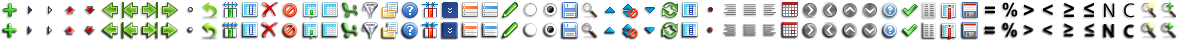
<style>
.page{position:relative;width:1180px;height:40px;background:#ffffff}
.page>*{position:absolute;margin:0}
.t1{font:20px "Arial-BoldMT";color:#000000}
.t2{font:18px "Arial-BoldMT";color:#000000}
.t3{font:20px "MyriadPro-Regular";color:#000000}
.t4{font:18px "MyriadPro-Bold";color:#000000}
</style>
<div class="page">
<p class="t1" style="left:985px;top:6px;width:10px;height:8px">=</p>
<p class="t2" style="left:1002px;top:2px;width:16px;height:15px">%</p>
<p class="t1" style="left:1024px;top:4px;width:10px;height:12px">&gt;</p>
<p class="t1" style="left:1043px;top:4px;width:10px;height:12px">&lt;</p>
<p class="t1" style="left:1064px;top:2px;width:10px;height:15px">≥</p>
<p class="t1" style="left:1084px;top:2px;width:10px;height:15px">≤</p>
<p class="t3" style="left:1104px;top:3px;width:11px;height:14px">N</p>
<p class="t3" style="left:1124px;top:3px;width:11px;height:15px">C</p>
<p class="t1" style="left:985px;top:26px;width:10px;height:8px">=</p>
<p class="t2" style="left:1002px;top:22px;width:16px;height:15px">%</p>
<p class="t2" style="left:1024px;top:24px;width:10px;height:11px">&gt;</p>
<p class="t2" style="left:1043px;top:24px;width:10px;height:11px">&lt;</p>
<p class="t2" style="left:1064px;top:23px;width:10px;height:13px">≥</p>
<p class="t2" style="left:1085px;top:23px;width:10px;height:13px">≤</p>
<p class="t2" style="left:1103px;top:24px;width:12px;height:13px">N</p>
<p class="t4" style="left:1124px;top:24px;width:10px;height:14px">C</p>
</div>
